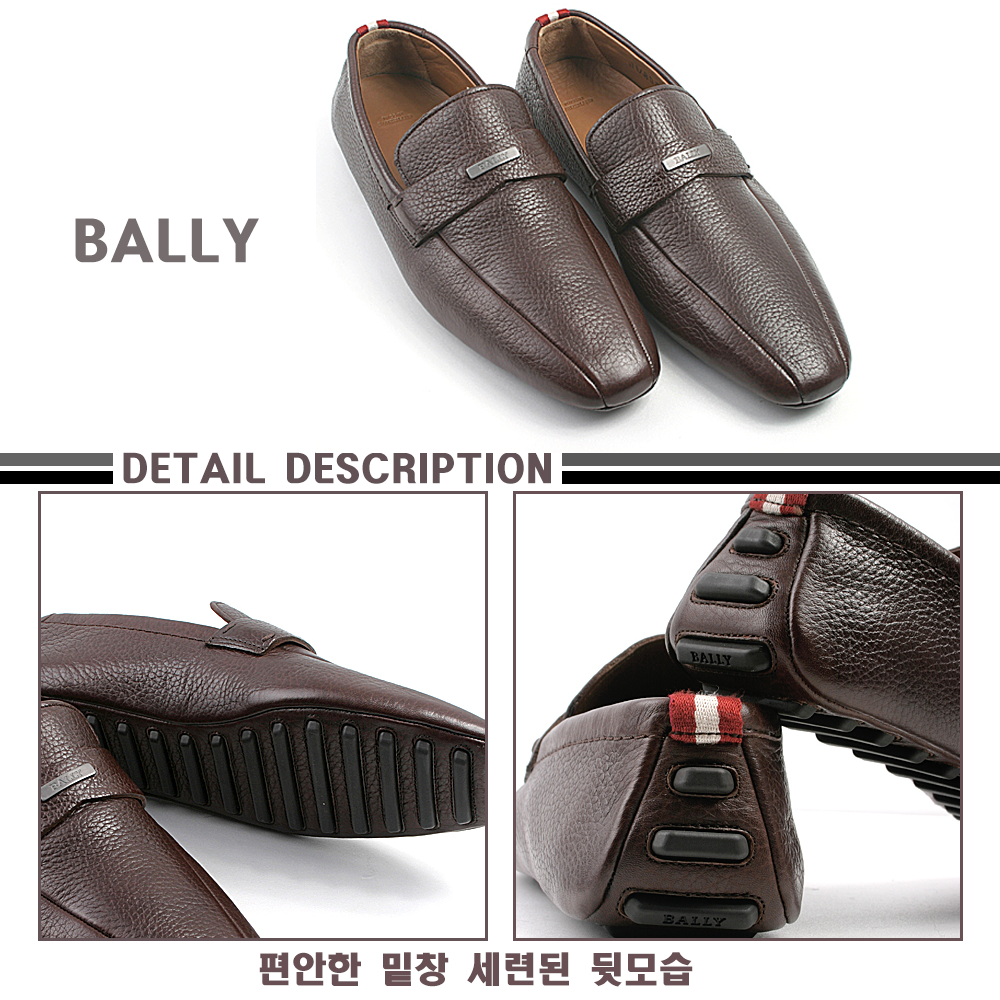
<style>
.page{position:relative;width:1000px;height:1000px;background:#ffffff}
.page>*{position:absolute;margin:0}
.t1{font:50px "HeadlineR-HM";color:#756c6d}
.t2{font:35px "HeadlineR-HM";color:#625255}
.t3{font:35px "HeadlineR-HM";color:#684f53}
</style>
<div class="page">
<p class="t1" style="left:75px;top:218px;width:184px;height:45px">BALLY</p>
<p class="t2" style="left:123px;top:452px;width:428px;height:32px">DETAIL DESCRIPTION</p>
<p class="t3" style="left:259px;top:952px;width:434px;height:35px">편안한 밑창 세련된 뒷모습</p>
</div>
